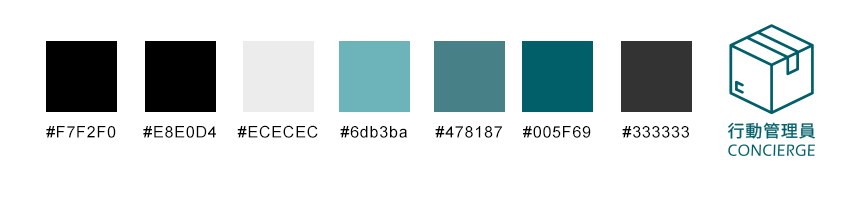
<style>
.page{position:relative;width:850px;height:200px;background:#ffffff}
.page>*{position:absolute;margin:0}
.t1{font:16px "ArialMT";letter-spacing:0.05em;color:#010101;text-transform:uppercase}
.t2{font:16px "ArialMT";letter-spacing:0.05em;color:#010101}
</style>
<div class="page">
<p class="t1" style="left:46px;top:126px;width:70px;height:12px">#f7f2f0</p>
<p class="t2" style="left:143px;top:126px;width:73px;height:12px">#E8E0D4</p>
<p class="t2" style="left:237px;top:125px;width:81px;height:13px">#ECECEC</p>
<p class="t2" style="left:340px;top:126px;width:67px;height:12px">#6db3ba</p>
<p class="t1" style="left:435px;top:126px;width:67px;height:12px">#478187</p>
<p class="t2" style="left:523px;top:126px;width:68px;height:12px">#005F69</p>
<p class="t2" style="left:622px;top:126px;width:67px;height:12px">#333333</p>
</div>
